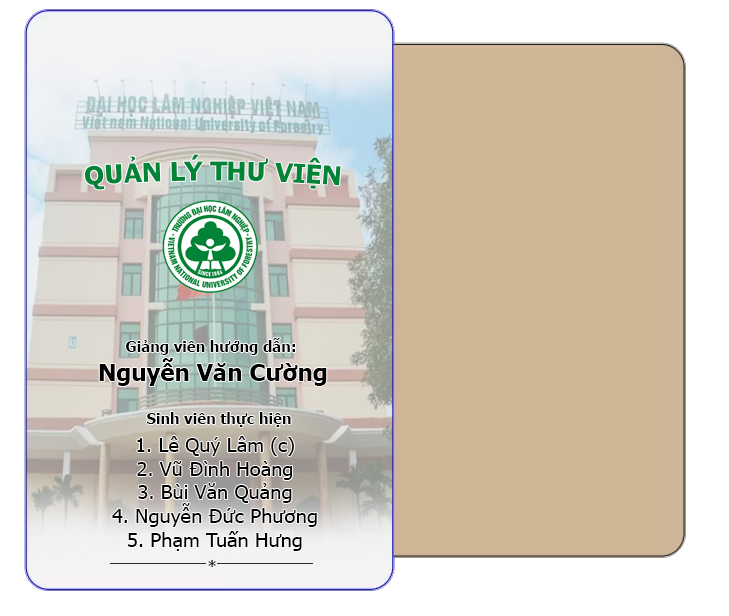
<style>
.page{position:relative;width:729px;height:616px;background:#ceb695}
.page>*{position:absolute;margin:0}
.t1{font:26px "Tahoma-Bold";color:#018438}
.t2{font:15px "Tahoma-Bold";color:#000000}
.t3{font:22.8px "Tahoma-Bold";color:#000000;scale:1.05 1}
.t4{font:19.1px "Tahoma";color:#000000;scale:1.05 1}
</style>
<div class="page">
<p class="t1" style="left:84px;top:154px;width:257px;height:36px">QUẢN LÝ THƯ VIỆN</p>
<p class="t2" style="left:126px;top:338px;width:169px;height:17px">Giảng viên hướng dẫn:</p>
<p class="t3" style="left:99px;top:358px;width:228px;height:28px">Nguyễn Văn Cường</p>
<p class="t2" style="left:147px;top:412px;width:144px;height:15px">Sinh viên thực hiện</p>
<p class="t4" style="left:112px;top:436px;width:205px;height:115px;text-align:center">1. Lê Quý Lâm (c)<br>2. Vũ Đình Hoàng<br>3. Bùi Văn Quảng<br>4. Nguyễn Đức Phương<br>5. Phạm Tuấn Hưng</p>
<p class="t2" style="left:208px;top:560px;width:8px;height:7px">*</p>
</div>
